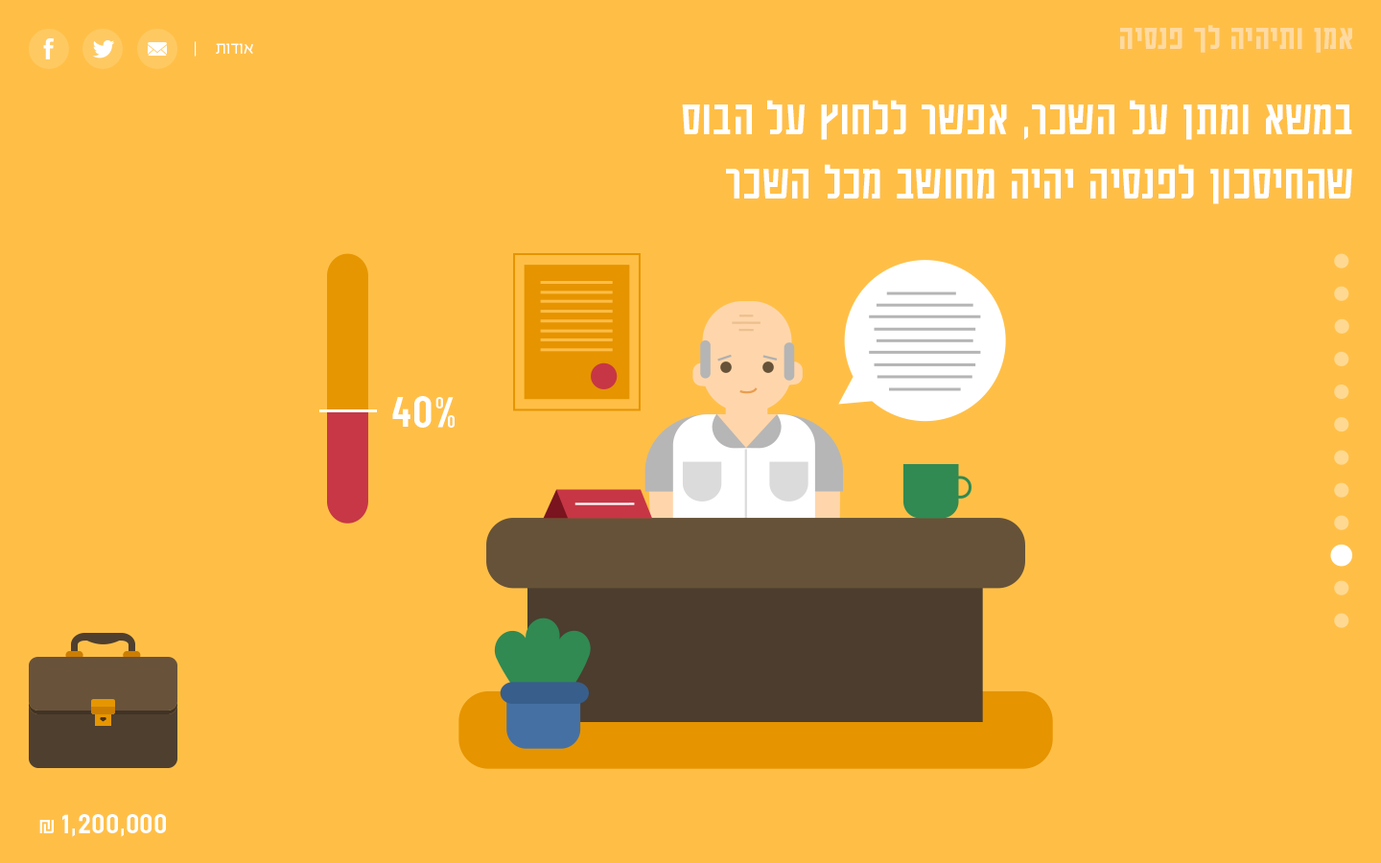
<style>
.page{position:relative;width:1381px;height:863px;background:#ffbf47}
.page>*{position:absolute;margin:0}
.t1{font:37.8px "AdumaFOT-Medium";color:#ffdaa1}
.t2{font:19.2px "EzerBlock_OE-Light";color:#ffffff}
.t3{font:53.8px "AdumaFOT-Regular";color:#ffffff}
.t4{font:33.6px "AdumaFOT-Regular";color:#ffffff}
.t5{font:24px "AdumaFOT-Regular";color:#ffffff}
</style>
<div class="page">
<p class="t1" style="left:1120px;top:25px;width:232px;height:28px">אמן ותיהיה לך פנסיה</p>
<p class="t2" style="left:195px;top:41px;width:58px;height:16px">אודות     |</p>
<p class="t3" style="left:682px;top:100px;width:670px;height:104px">במשא ומתן על השכר, אפשר ללחוץ על הבוס <br>שהחיסכון לפנסיה יהיה מחושב מכל השכר</p>
<p class="t3" style="left:392px;top:396px;width:63px;height:32px">40%</p>
<p class="t4" style="left:39px;top:814px;width:127px;height:23px">1,200,000<span class="t5"> ₪</span></p>
</div>
